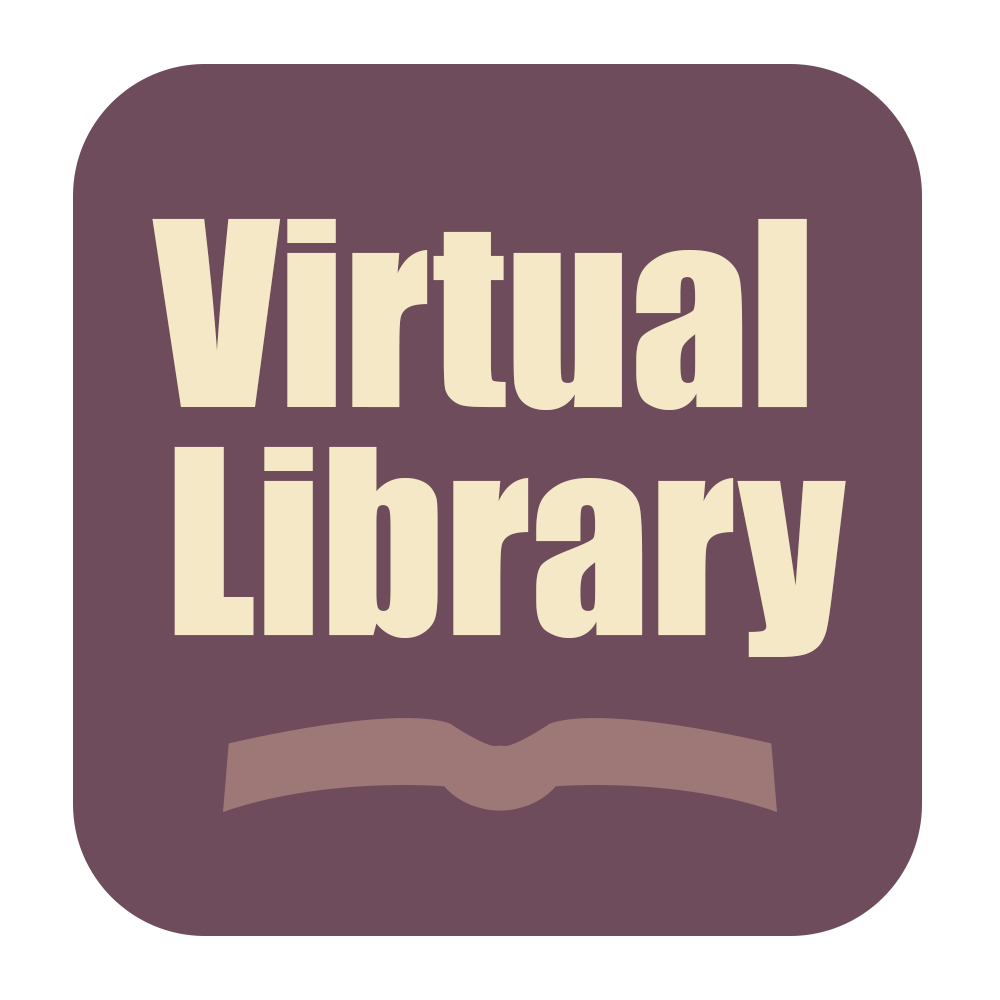
<style>
.page{position:relative;width:1000px;height:1000px;background:#6e4c5c}
.page>*{position:absolute;margin:0}
.t1{font:237.9px/228.1px "Impact";color:#f5e8c6}
</style>
<div class="page">
<p class="t1" style="left:152px;top:218px;width:694px;height:439px;text-align:center">Virtual <br>Library</p>
</div>
